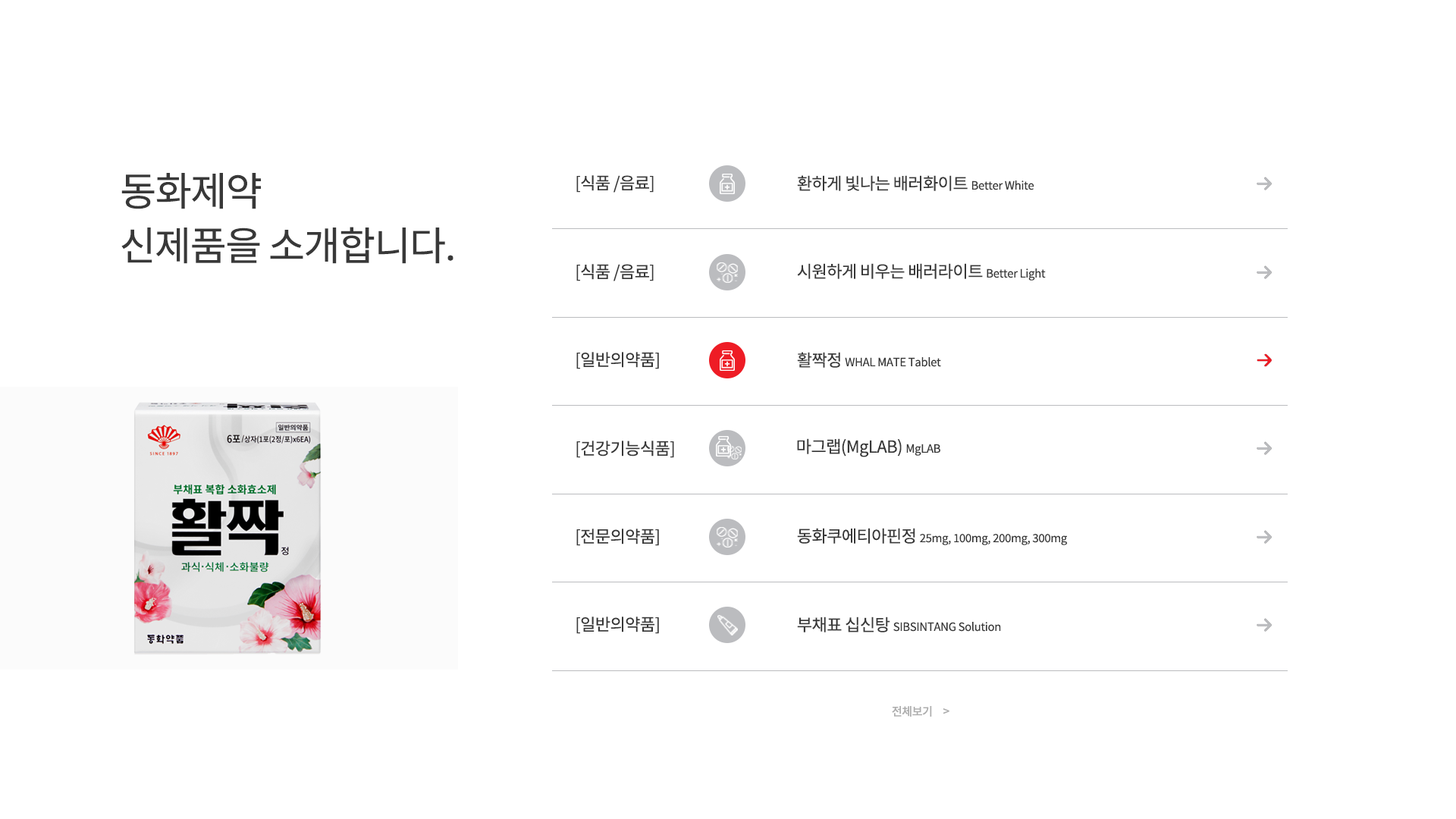
<style>
.page{position:relative;width:1456px;height:819px;background:#ffffff}
.page>*{position:absolute;margin:0}
.t1{font:39.4px "NotoSansKR-Regular";letter-spacing:-0.025em;color:#383838}
.t2{font:16.7px "NotoSansKR-Regular";letter-spacing:-0.025em;color:#383838}
.t3{font:11.4px "NotoSansKR-Regular";letter-spacing:-0.025em;color:#383838}
.t4{font:11.4px "NotoSansKR-Medium";letter-spacing:-0.025em;color:#adadad}
</style>
<div class="page">
<p class="t1" style="left:121px;top:173px;width:140px;height:36px">동화제약</p>
<p class="t2" style="left:576px;top:175px;width:78px;height:18px">[식품 /음료]</p>
<p class="t2" style="left:797px;top:175px;width:237px;height:16px">환하게 빛나는 배러화이트 <span class="t3">Better White</span></p>
<p class="t1" style="left:121px;top:227px;width:332px;height:37px">신제품을 소개합니다.</p>
<p class="t2" style="left:576px;top:264px;width:78px;height:17px">[식품 /음료]</p>
<p class="t2" style="left:797px;top:263px;width:249px;height:18px">시원하게 비우는 배러라이트 <span class="t3">Better Light</span></p>
<p class="t2" style="left:576px;top:352px;width:83px;height:17px">[일반의약품]</p>
<p class="t3" style="left:797px;top:352px;width:144px;height:16px"><span class="t2">활짝정 </span>WHAL MATE Tablet</p>
<p class="t2" style="left:576px;top:441px;width:98px;height:17px">[건강기능식품]</p>
<p class="t2" style="left:797px;top:438px;width:143px;height:19px">마그랩(MgLAB) <span class="t3">MgLAB</span></p>
<p class="t2" style="left:576px;top:529px;width:83px;height:17px">[전문의약품]</p>
<p class="t3" style="left:797px;top:528px;width:271px;height:17px"><span class="t2">동화쿠에티아핀정 </span>25mg, 100mg, 200mg, 300mg</p>
<p class="t2" style="left:576px;top:617px;width:83px;height:17px">[일반의약품]</p>
<p class="t3" style="left:797px;top:617px;width:204px;height:15px"><span class="t2">부채표 십신탕 </span>SIBSINTANG Solution</p>
<p class="t4" style="left:892px;top:706px;width:40px;height:11px">전체보기</p>
<p class="t4" style="left:943px;top:708px;width:6px;height:6px">&gt;</p>
</div>
